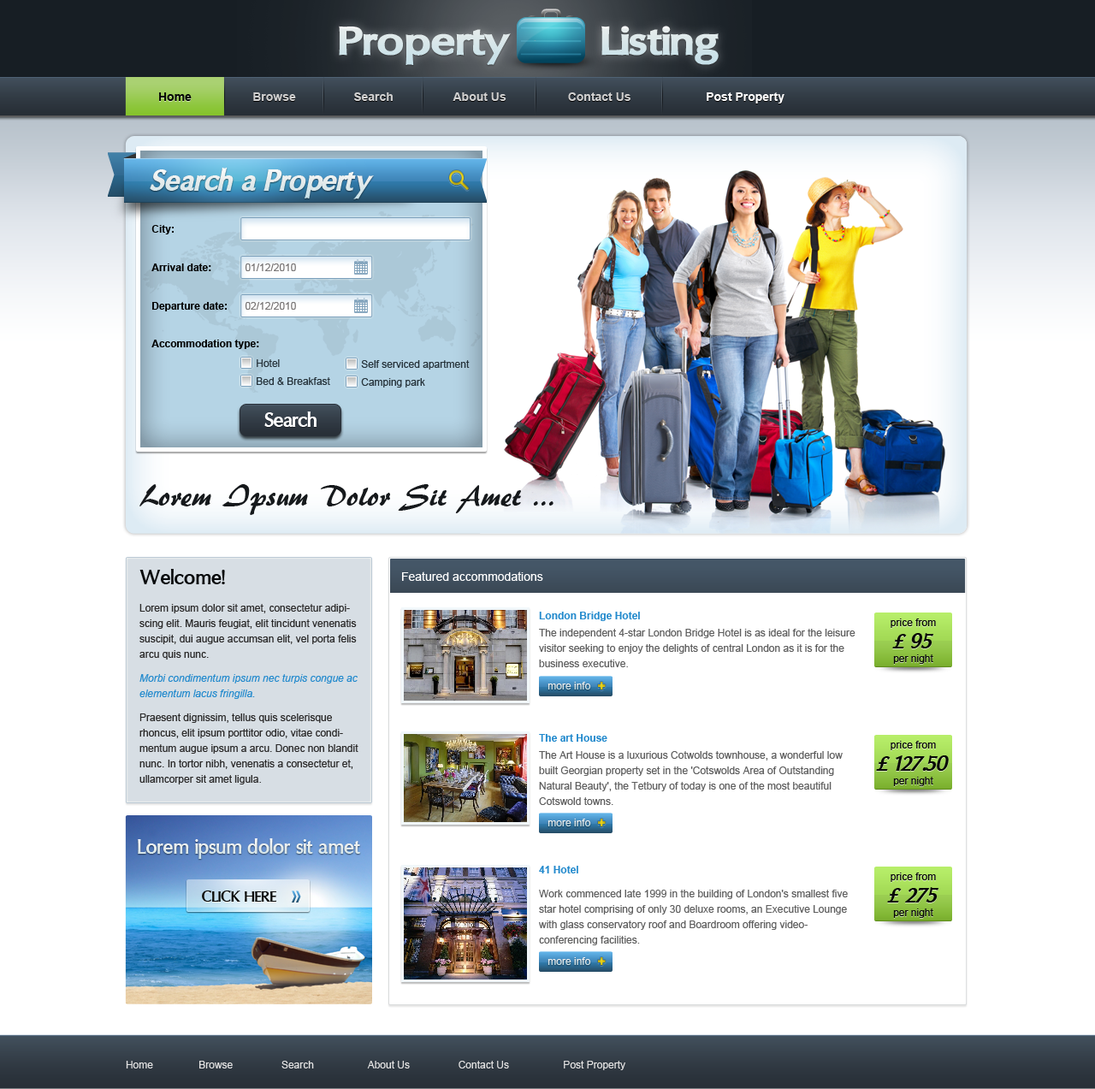
<style>
.page{position:relative;width:1095px;height:1089px;background:#ffffff}
.page>*{position:absolute;margin:0}
.t1{font:41.1px "OregonLDOExtendedBlack";color:#d8e6ea}
.t2{font:12px "Arial-BoldMT";color:#070806}
.t3{font:12px "Arial-BoldMT";color:#cfcfcf}
.t4{font:12px "Arial-BoldMT";color:#ffffff}
.t5{font:30.8px "OregonLDOExtraBlack-Oblique";color:#e4ebeb}
.t6{font:10.3px "Arial-BoldMT";color:#010101}
.t7{font:10.3px "Arial-BoldMT";color:#000000}
.t8{font:10.3px "ArialMT";color:#787575}
.t9{font:10.3px "ArialMT";color:#26323a}
.t10{font:10.3px "ArialMT";color:#25323a}
.t11{font:20.5px "OregonLDOExtraBold";letter-spacing:-0.025em;color:#ffffff}
.t12{font:30.8px "ARBERKLEY";color:#16191c}
.t13{font:20.5px "OregonLDO-Bold";color:#090b0d}
.t14{font:12px "ArialMT";color:#ffffff}
.t15{font:10.3px/15.4px "ArialMT";color:#2a2929}
.t16{font:10.3px/12px "Arial-ItalicMT";color:#238acd}
.t17{font:10.3px/15.4px "Arial-ItalicMT";color:#238acd}
.t18{font:10.3px/12px "ArialMT";color:#2a2929}
.t19{font:10.3px/15.4px "ArialMT";color:#5e5e5e}
.t20{font:10.3px/15.4px "Arial-BoldMT";color:#238acd}
.t21{font:10.3px/8.6px "ArialMT";color:#5e5e5e}
.t22{font:10.3px/13.7px "ArialMT";color:#070806}
.t23{font:10.3px/18.8px "ArialMT";color:#070806}
.t24{font:10.3px/20.5px "ArialMT";color:#070806}
.t25{font:10.3px/22.2px "ArialMT";color:#070806}
.t26{font:22.2px/22.2px "OregonLDOExtraBold-Oblique";color:#070806}
.t27{font:10.3px "ArialMT";color:#e1eaeb}
.t28{font:13.7px "Arial-Black"}
.t29{font:20.5px "OregonLDO-Bold";color:#e4ebeb}
.t30{font:15.4px "OregonLDO-Bold";color:#000000;text-transform:uppercase}
.t31{font:10.3px "ArialMT";color:#e5e4e4}
</style>
<div class="page">
<p class="t1" style="left:339px;top:26px;width:380px;height:39px">Property        Listing</p>
<p class="t2" style="left:159px;top:92px;width:33px;height:9px">Home</p>
<p class="t3" style="left:253px;top:92px;width:43px;height:9px">Browse</p>
<p class="t3" style="left:354px;top:92px;width:39px;height:9px">Search</p>
<p class="t3" style="left:453px;top:92px;width:53px;height:9px">About Us</p>
<p class="t3" style="left:568px;top:92px;width:62px;height:9px">Contact Us</p>
<p class="t4" style="left:707px;top:92px;width:77px;height:12px">Post Property</p>
<p class="t5" style="left:150px;top:168px;width:224px;height:31px">Search a Property</p>
<p class="t6" style="left:151px;top:225px;width:23px;height:9px">City:</p>
<p class="t7" style="left:151px;top:263px;width:60px;height:8px">Arrival date:</p>
<p class="t8" style="left:245px;top:263px;width:51px;height:8px">01/12/2010</p>
<p class="t7" style="left:152px;top:302px;width:75px;height:9px">Departure date:</p>
<p class="t8" style="left:245px;top:302px;width:51px;height:8px">02/12/2010</p>
<p class="t7" style="left:151px;top:340px;width:108px;height:9px">Accommodation type:</p>
<p class="t9" style="left:257px;top:359px;width:23px;height:8px">Hotel</p>
<p class="t10" style="left:361px;top:360px;width:109px;height:10px">Self serviced apartment</p>
<p class="t10" style="left:257px;top:377px;width:73px;height:8px">Bed &amp; Breakfast</p>
<p class="t10" style="left:361px;top:378px;width:64px;height:10px">Camping park</p>
<p class="t11" style="left:264px;top:411px;width:53px;height:16px">Search</p>
<p class="t12" style="left:139px;top:484px;width:414px;height:31px">Lorem Ipsum Dolor Sit Amet ...</p>
<p class="t13" style="left:139px;top:569px;width:86px;height:15px">Welcome!</p>
<p class="t14" style="left:402px;top:571px;width:141px;height:10px">Featured accommodations</p>
<p class="t15" style="left:139px;top:604px;width:219px;height:180px">Lorem ipsum dolor sit amet, consectetur adipiscing elit. Mauris feugiat, elit tincidunt venenatis suscipit, dui augue accumsan elit, vel porta felis arcu quis nunc. <br><br><span class="t16">Morbi condimentum ipsum nec turpis congue ac </span><span class="t17">elementum lacus fringilla. <br></span><span class="t18"><br>Praesent dignissim, tellus quis scelerisque </span>rhoncus, elit ipsum porttitor odio, vitae condimentum augue ipsum a arcu. Donec non blandit nunc. In tortor nibh, venenatis a consectetur et, ullamcorper sit amet ligula.</p>
<p class="t19" style="left:539px;top:612px;width:316px;height:55px"><span class="t20">London Bridge Hotel<br></span><span class="t21"><br>The independent 4-star London Bridge Hotel is as ideal for the leisure </span>visitor seeking to enjoy the delights of central London as it is for the business executive.</p>
<p class="t22" style="left:891px;top:618px;width:45px;height:46px;text-align:center"><span class="t23">price</span><span class="t24"> f</span><span class="t25">rom<br></span><span class="t26">£ 95<br></span>per night</p>
<p class="t27" style="left:547px;top:682px;width:44px;height:7px">more info</p>
<p class="t28" style="left:598px;top:682px;width:8px;height:7px">+</p>
<p class="t19" style="left:539px;top:734px;width:304px;height:71px"><span class="t20">The art House<br></span><span class="t21"><br>The Art House is a luxurious Cotwolds townhouse, a wonderful low </span>built Georgian property set in the 'Cotswolds Area of Outstanding Natural Beauty', the Tetbury of today is one of the most beautiful Cotswold towns.</p>
<p class="t22" style="left:876px;top:741px;width:73px;height:45px;text-align:center"><span class="t23">price</span><span class="t24"> f</span><span class="t25">rom<br></span><span class="t26">£ 127.50<br></span>per night</p>
<p class="t27" style="left:547px;top:819px;width:44px;height:7px">more info</p>
<p class="t28" style="left:598px;top:819px;width:8px;height:7px">+</p>
<p class="t29" style="left:138px;top:838px;width:222px;height:21px">Lorem ipsum dolor sit amet</p>
<p class="t19" style="left:539px;top:866px;width:309px;height:79px"><span class="t20">41 Hotel<br><br></span><span class="t21">Work commenced late 1999 in the bui</span>lding of London's smallest five star hotel comprising of only 30 deluxe rooms, an Executive Lounge with glass conservatory roof and Boardroom offering video-conferencing facilities.</p>
<p class="t22" style="left:887px;top:873px;width:52px;height:45px;text-align:center"><span class="t23">price</span><span class="t24"> f</span><span class="t25">rom<br></span><span class="t26">£ 275<br></span>per night</p>
<p class="t30" style="left:202px;top:891px;width:74px;height:11px">Click Here</p>
<p class="t27" style="left:547px;top:957px;width:44px;height:8px">more info</p>
<p class="t28" style="left:598px;top:957px;width:8px;height:8px">+</p>
<p class="t31" style="left:126px;top:1061px;width:499px;height:9px">Home                Browse                 Search                   About Us                 Contact Us                   Post Property</p>
</div>
